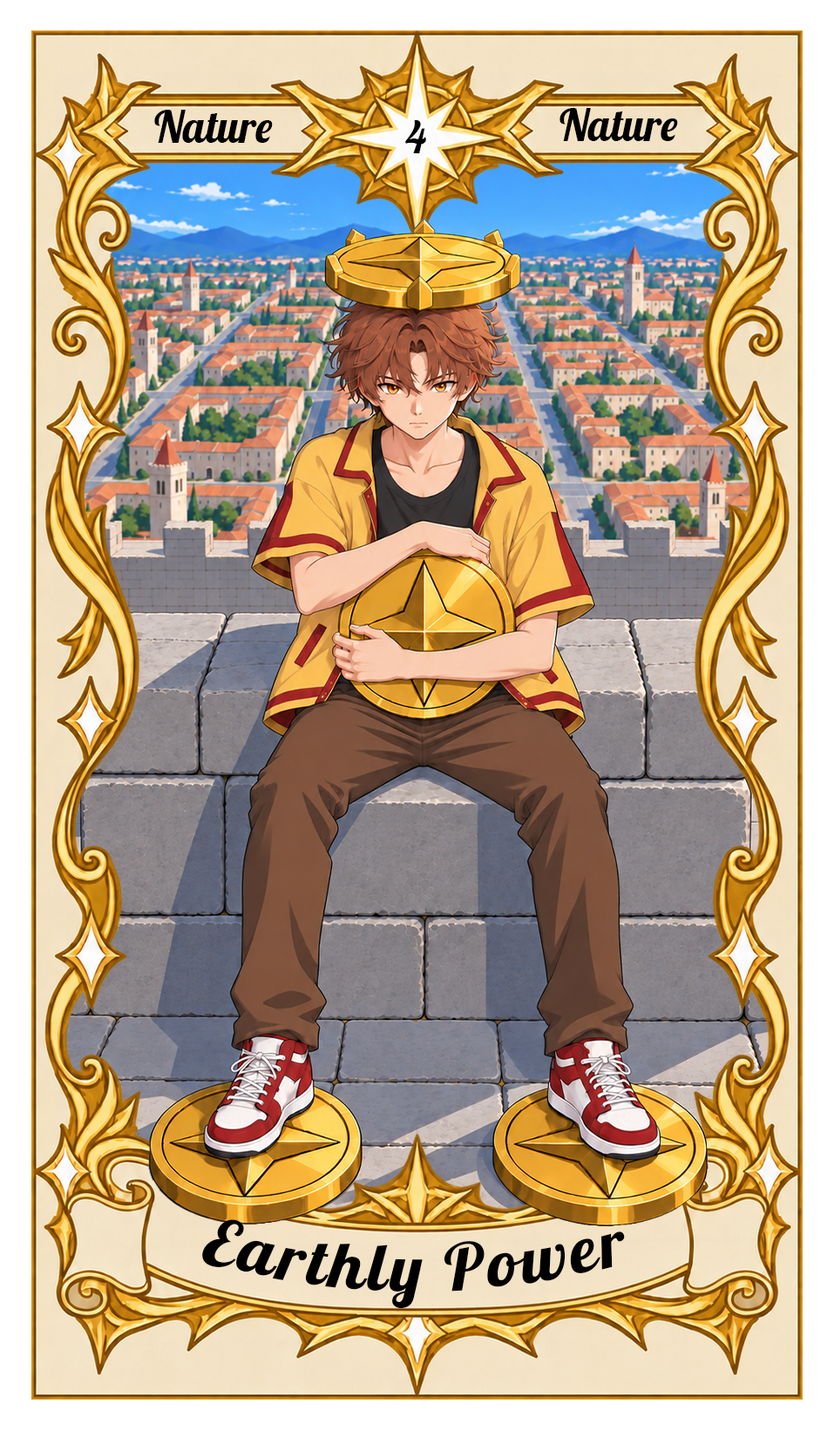
<style>
.page{position:relative;width:834px;height:1430px}
.page>*{position:absolute;margin:0}
.t1{font:43.6px "Lobster-Regular";color:#000000}
.t2{font:65.3px "Lobster-Regular";letter-spacing:0.05em;color:#000000}
</style>
<div class="page">
<p class="t1" style="left:154px;top:110px;width:119px;height:33px">Nature</p>
<p class="t1" style="left:559px;top:108px;width:119px;height:33px">Nature</p>
<p class="t1" style="left:404px;top:120px;width:22px;height:33px">4</p>
<p class="t2" style="left:202px;top:1220px;width:423px;height:89px">Earthly Power</p>
</div>
